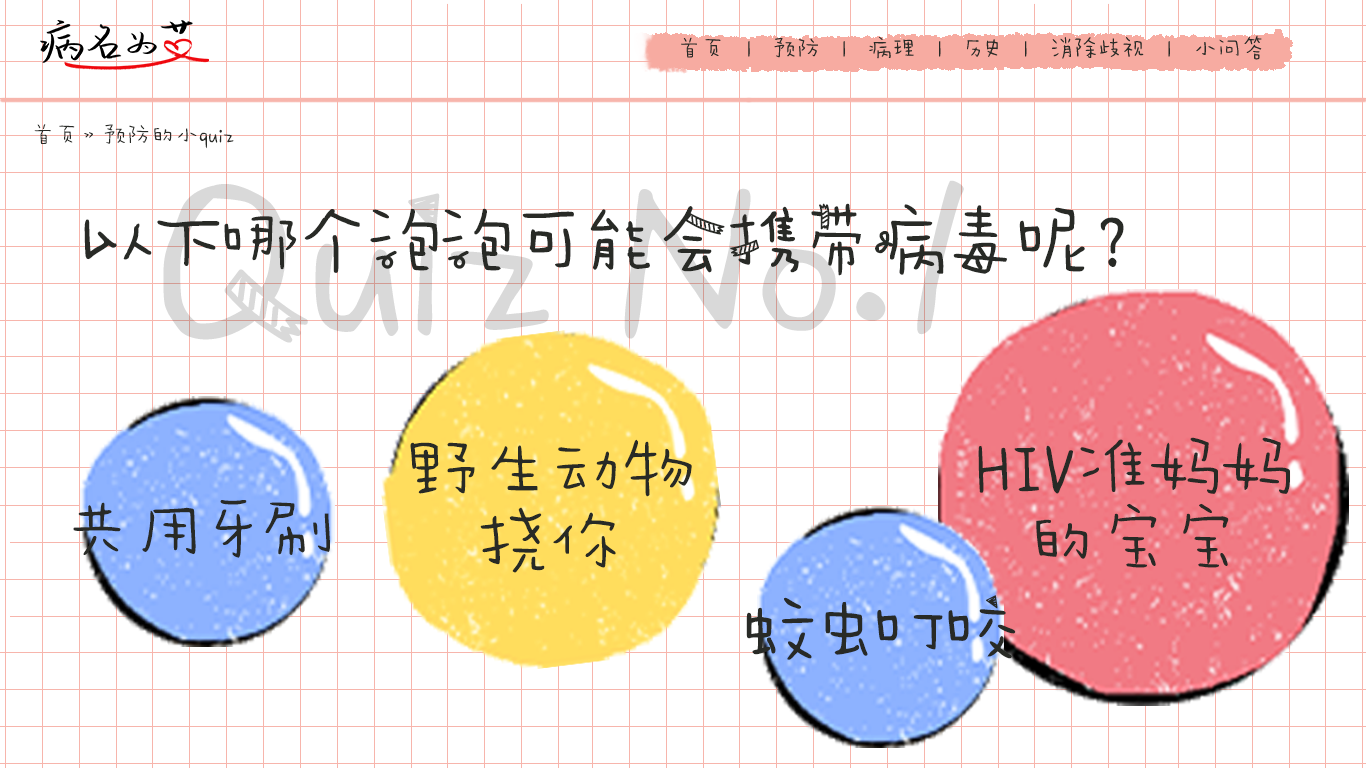
<style>
.page{position:relative;width:1366px;height:768px;background:#ffffff}
.page>*{position:absolute;margin:0}
.t1{font:24px "AaWanWan";color:#282a26}
.t2{font:72px "AaPaperTape";color:#282a26}
.t3{font:72px/72px "AaWanWan";color:#282a26}
.t4{font:72px "AaWanWan";color:#282a26}
</style>
<div class="page">
<p class="t1" style="left:34px;top:124px;width:200px;height:25px">首页》预防的小quiz</p>
<p class="t2" style="left:84px;top:203px;width:1040px;height:73px">以下哪个泡泡可能会携带病毒呢？</p>
<p class="t3" style="left:978px;top:437px;width:312px;height:131px;text-align:center">HIV准妈妈<br>的宝宝</p>
<p class="t3" style="left:410px;top:439px;width:282px;height:134px;text-align:center">野生动物<br>挠你</p>
<p class="t4" style="left:73px;top:500px;width:257px;height:58px">共用牙刷</p>
<p class="t2" style="left:746px;top:595px;width:270px;height:65px">蚊虫叮咬</p>
</div>
